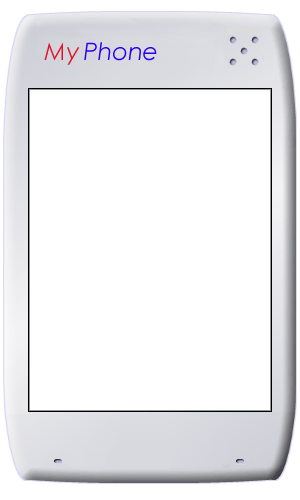
<style>
.page{position:relative;width:300px;height:500px;background:#ffffff}
.page>*{position:absolute;margin:0}
.t1{font:24px "CenturyGothic-Italic";color:#e1132b}
.t2{font:24px "CenturyGothic-Italic";color:#2c00ec}
</style>
<div class="page">
<p class="t1" style="left:44px;top:42px;width:36px;height:23px">My</p>
<p class="t2" style="left:84px;top:42px;width:73px;height:19px">Phone</p>
</div>
